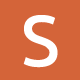
<style>
.page{position:relative;width:80px;height:80px;background:#d46439}
.page>*{position:absolute;margin:0}
.t1{font:74.7px "SukhumvitSet-SemiBold";color:#ffffff}
</style>
<div class="page">
<p class="t1" style="left:23px;top:15px;width:35px;height:53px">S</p>
</div>
